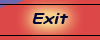
<style>
.page{position:relative;width:100px;height:40px;background:#dc4747}
.page>*{position:absolute;margin:0}
.t1{font:15px "ComicSansMS-Bold";color:#040736;font-style:italic;scale:1.2 1}
</style>
<div class="page">
<p class="t1" style="left:32px;top:13px;width:37px;height:11px">Exit</p>
</div>
